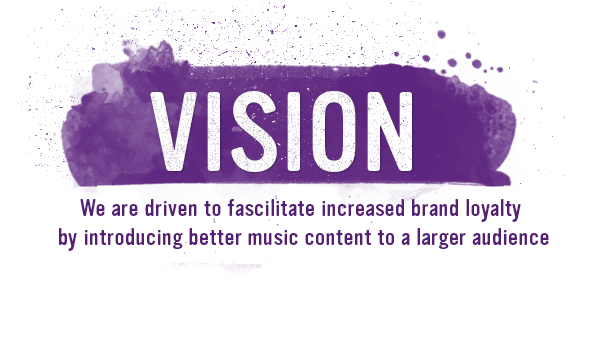
<style>
.page{position:relative;width:600px;height:350px;background:#ffffff}
.page>*{position:absolute;margin:0}
.t1{font:110px "VinylOT-Regular";letter-spacing:0.02em;color:#ffffff}
.t2{font:24px "VinylOT-Regular";letter-spacing:0.02em;color:#561f73}
</style>
<div class="page">
<p class="t1" style="left:150px;top:91px;width:262px;height:81px">VISION</p>
<p class="t2" style="left:59px;top:199px;width:490px;height:52px;text-align:center">We are driven to fascilitate increased brand loyalty<br> by introducing better music content to a larger audience</p>
</div>
